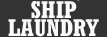
<style>
.page{position:relative;width:107px;height:37px;background:#333333}
.page>*{position:absolute;margin:0}
.t1{font:24px/18px "Rockwell-CondensedBold";letter-spacing:0.005em;color:#fbf9f9}
</style>
<div class="page">
<p class="t1" style="left:8px;top:1px;width:91px;height:36px;text-align:center">SHIP <br>LAUNDRY</p>
</div>
